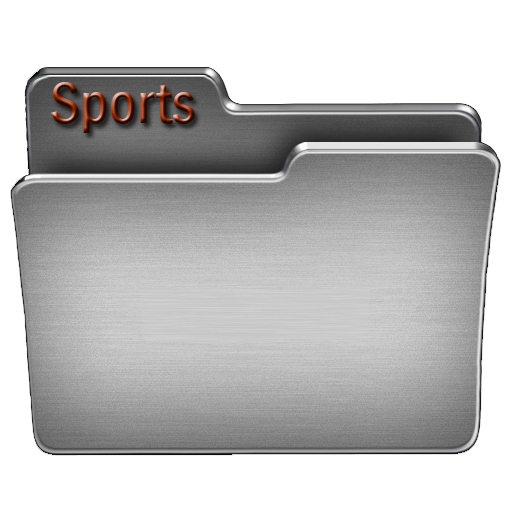
<style>
.page{position:relative;width:512px;height:512px;background:#ffffff}
.page>*{position:absolute;margin:0}
.t1{font:60px "FranklinGothic-MediumCond"}
</style>
<div class="page">
<p class="t1" style="left:51px;top:82px;width:144px;height:51px">Sports</p>
</div>
